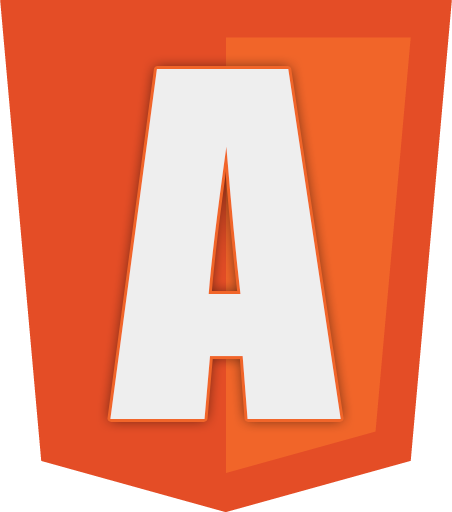
<style>
.page{position:relative;width:452px;height:512px;background:#e44d26}
.page>*{position:absolute;margin:0}
.t1{font:442.8px "Impact";color:#eeeeee}
</style>
<div class="page">
<p class="t1" style="left:110px;top:69px;width:231px;height:350px">A</p>
</div>
